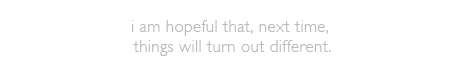
<style>
.page{position:relative;width:463px;height:65px;background:#ffffff}
.page>*{position:absolute;margin:0}
.t1{font:17px/20px "GillSans-Light";letter-spacing:0.02em;color:#bababa}
</style>
<div class="page">
<p class="t1" style="left:132px;top:20px;width:199px;height:36px;text-align:center">i am hopeful that, next time, <br>things will turn out different.</p>
</div>
